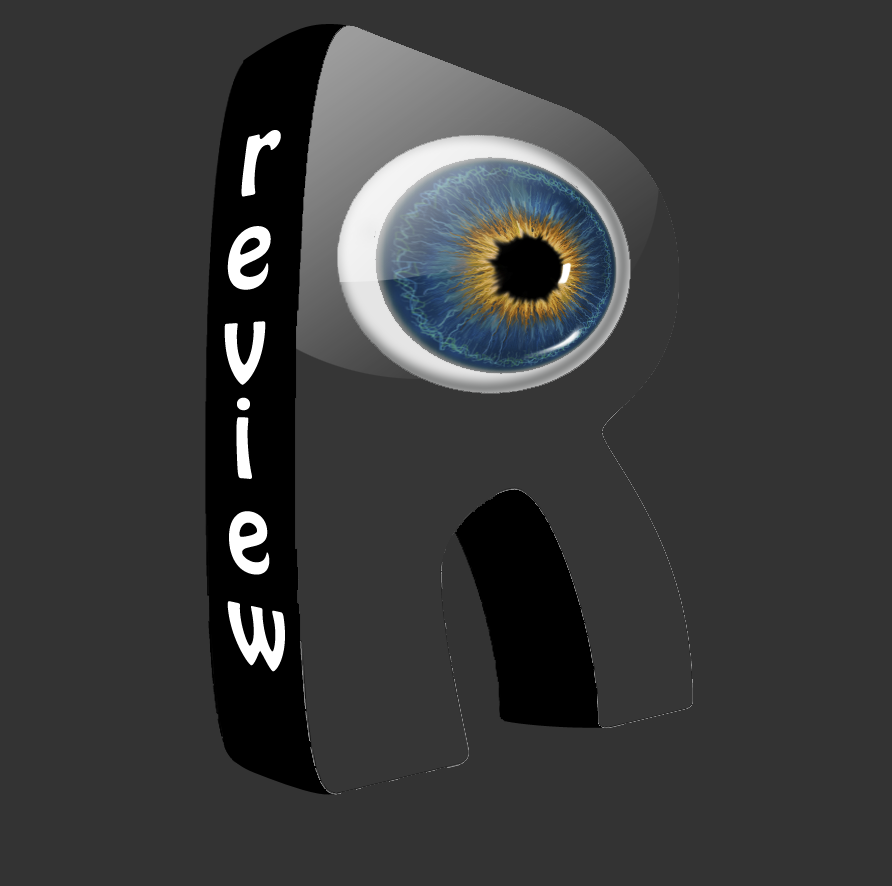
<style>
.page{position:relative;width:892px;height:886px;background:#333333}
.page>*{position:absolute;margin:0}
.t1{font:91.7px "HoboStd";color:#ffffff}
</style>
<div class="page">
<p class="t1" style="left:224px;top:130px;width:61px;height:542px;text-align:center">review</p>
</div>
